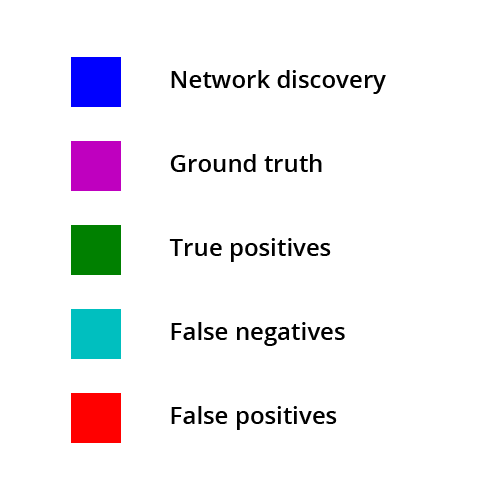
<style>
.page{position:relative;width:500px;height:500px;background:#ffffff}
.page>*{position:absolute;margin:0}
.t1{font:24px "OpenSans-Semibold";color:#000000}
</style>
<div class="page">
<p class="t1" style="left:171px;top:70px;width:215px;height:24px">Network discovery</p>
<p class="t1" style="left:170px;top:154px;width:152px;height:18px">Ground truth</p>
<p class="t1" style="left:169px;top:238px;width:162px;height:24px">True positives</p>
<p class="t1" style="left:171px;top:322px;width:174px;height:24px">False negatives</p>
<p class="t1" style="left:171px;top:406px;width:166px;height:24px">False positives</p>
</div>
